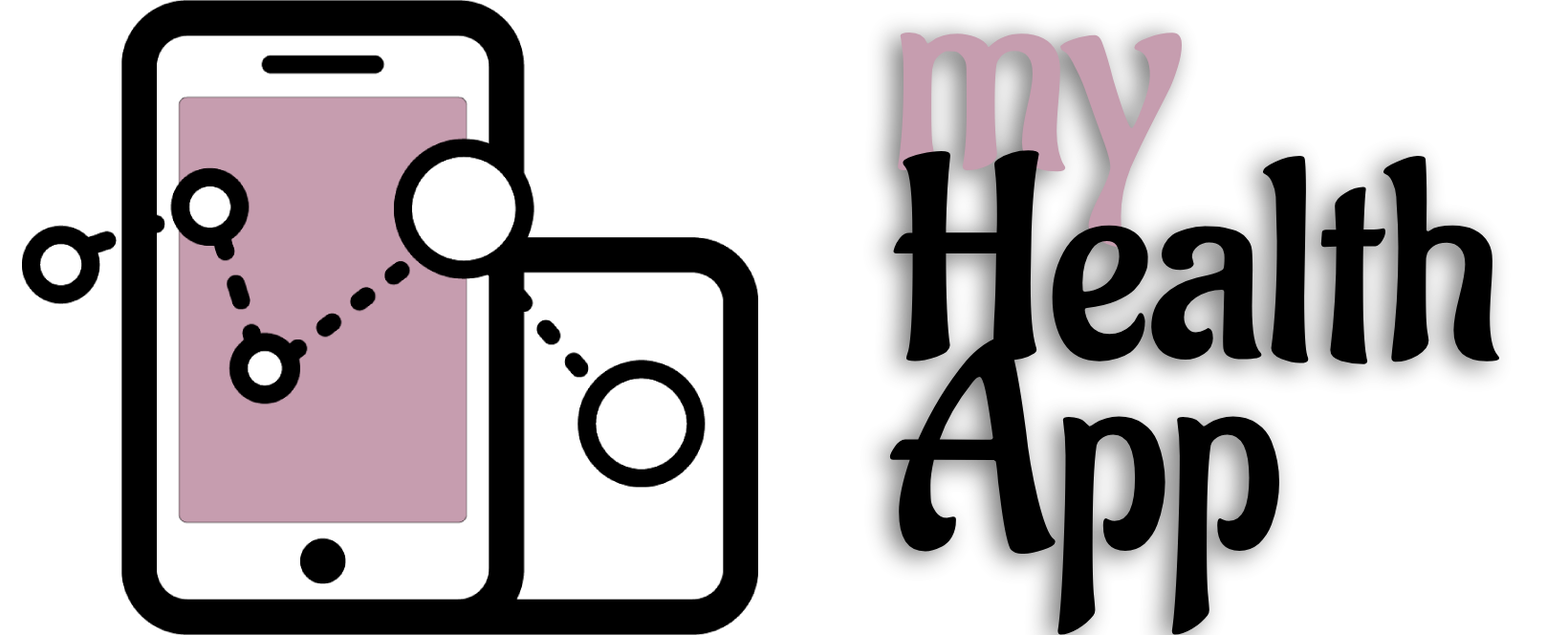
<style>
.page{position:relative;width:1568px;height:635px;background:#ffffff}
.page>*{position:absolute;margin:0}
.t1{font:286.8px/191.2px "Aladin-Regular";color:#000000}
.t2{font:286.8px/191.2px "Aladin-Regular";color:#c69daf}
</style>
<div class="page">
<p class="t1" style="left:889px;top:33px;width:611px;height:602px"><span class="t2">my<br></span>Health<br>App</p>
</div>
